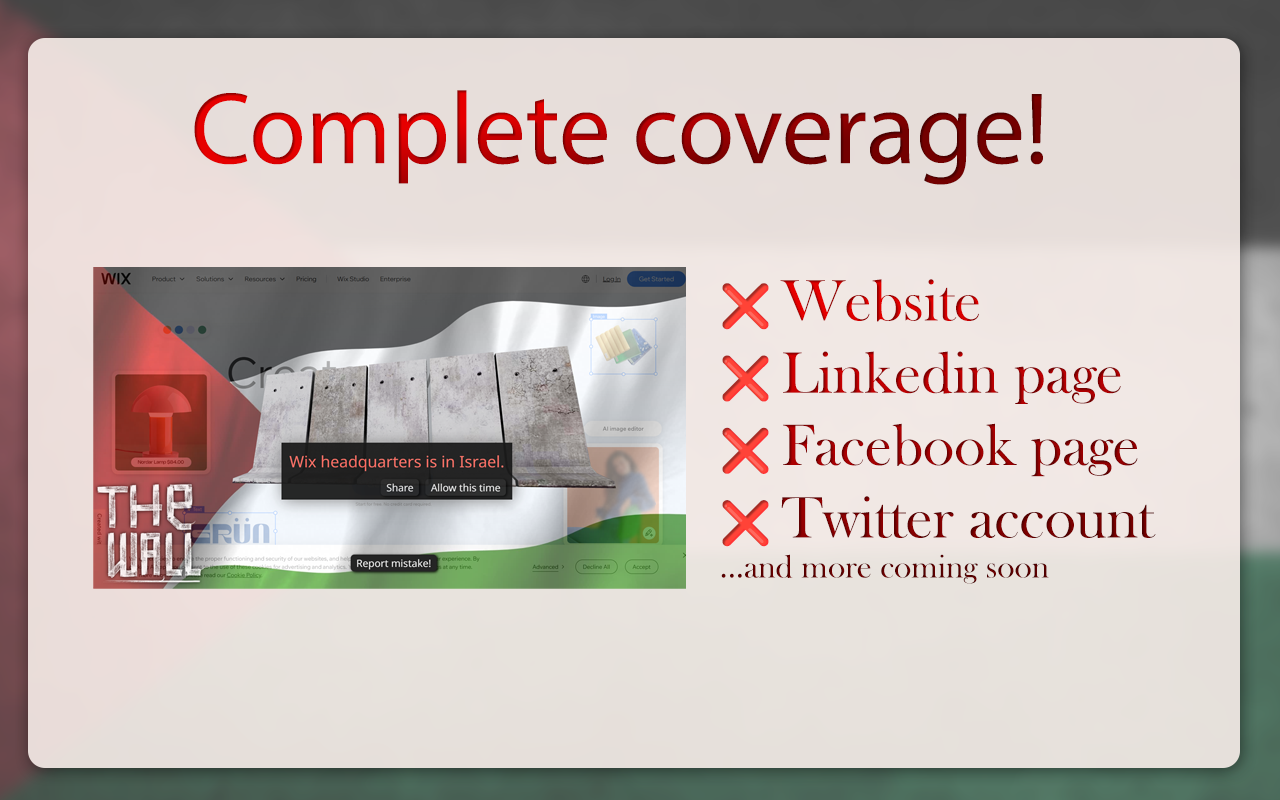
<style>
.page{position:relative;width:1280px;height:800px}
.page>*{position:absolute;margin:0}
.t1{font:102.8px "MyriadPro-Regular"}
.t2{font:33.3px "BaskOldFace"}
.t3{font:41.7px "NotoColorEmoji-SVG"}
.t4{font:60.3px "BaskOldFace"}
</style>
<div class="page">
<p class="t1" style="left:194px;top:90px;width:849px;height:95px">Complete coverage!</p>
<p class="t2" style="left:721px;top:279px;width:435px;height:305px"><span class="t3">❌ </span><span class="t4">Website<br></span><span class="t3">❌ </span><span class="t4">Linkedin page<br></span><span class="t3">❌ </span><span class="t4">Facebook page<br></span><span class="t3">❌ </span><span class="t4">Twitter account</span><br>...and more coming soon</p>
</div>
